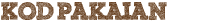
<style>
.page{position:relative;width:204px;height:21px;background:#ffffff}
.page>*{position:absolute;margin:0}
.t1{font:24px "ScribbleBoxDEMO";color:#684121}
</style>
<div class="page">
<p class="t1" style="left:1px;top:1px;width:166px;height:20px">Kod Pakaian</p>
</div>
